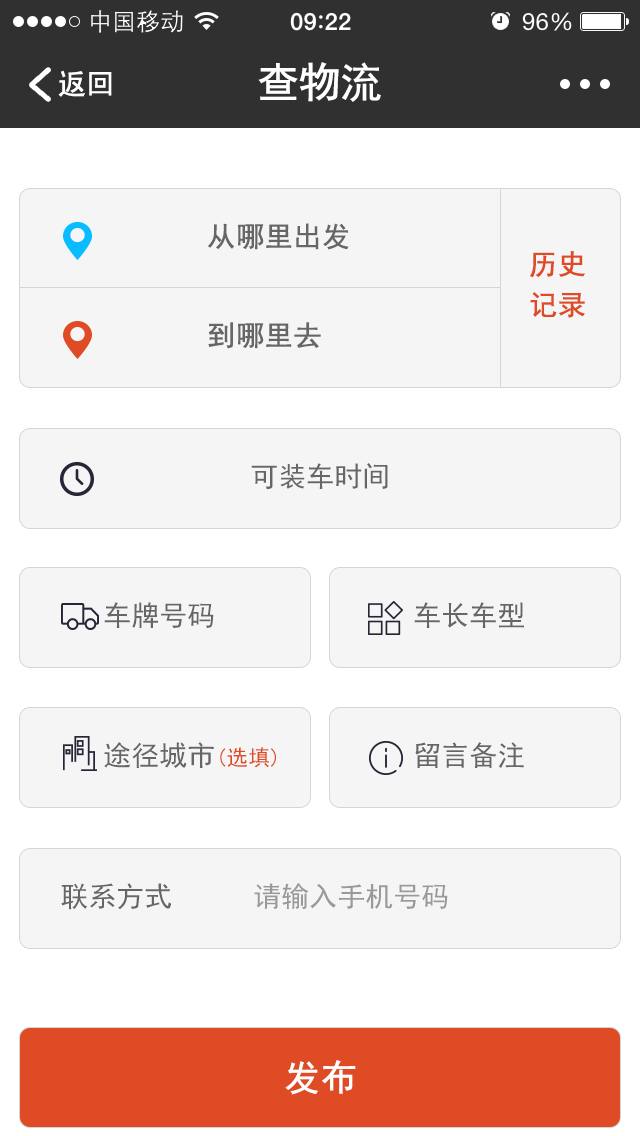
<style>
.page{position:relative;width:640px;height:1136px;background:#f5f5f5}
.page>*{position:absolute;margin:0}
.t1{font:42px "SimHei";letter-spacing:-0.04em;color:#ffffff;font-weight:bold}
.t2{font:28px "SimHei";color:#ffffff;font-weight:bold}
.t3{font:28px "SimHei";color:#666666;font-weight:bold}
.t4{font:28px/40.3px "SimHei";color:#df4b24;font-weight:bold}
.t5{font:28px "SimHei";color:#666666}
.t6{font:22px "SimHei";color:#df4b24}
.t7{font:28px "SimHei";color:#999999}
.t8{font:36px "SimHei";color:#ffffff;font-weight:bold}
</style>
<div class="page">
<p class="t1" style="left:258px;top:62px;width:123px;height:40px">查物流</p>
<p class="t2" style="left:58px;top:70px;width:54px;height:27px">返回</p>
<p class="t3" style="left:208px;top:223px;width:141px;height:27px">从哪里出发</p>
<p class="t4" style="left:530px;top:251px;width:56px;height:67px">历史<br>记录</p>
<p class="t3" style="left:208px;top:322px;width:113px;height:27px">到哪里去</p>
<p class="t5" style="left:251px;top:463px;width:137px;height:27px">可装车时间</p>
<p class="t5" style="left:104px;top:602px;width:110px;height:26px">车牌号码</p>
<p class="t5" style="left:414px;top:602px;width:110px;height:26px">车长车型</p>
<p class="t5" style="left:104px;top:742px;width:172px;height:26px">途径城市<span class="t6">(选填)</span></p>
<p class="t5" style="left:415px;top:742px;width:109px;height:26px">留言备注</p>
<p class="t5" style="left:61px;top:883px;width:111px;height:27px">联系方式</p>
<p class="t7" style="left:254px;top:883px;width:194px;height:27px">请输入手机号码</p>
<p class="t8" style="left:285px;top:1060px;width:71px;height:35px">发布</p>
</div>
